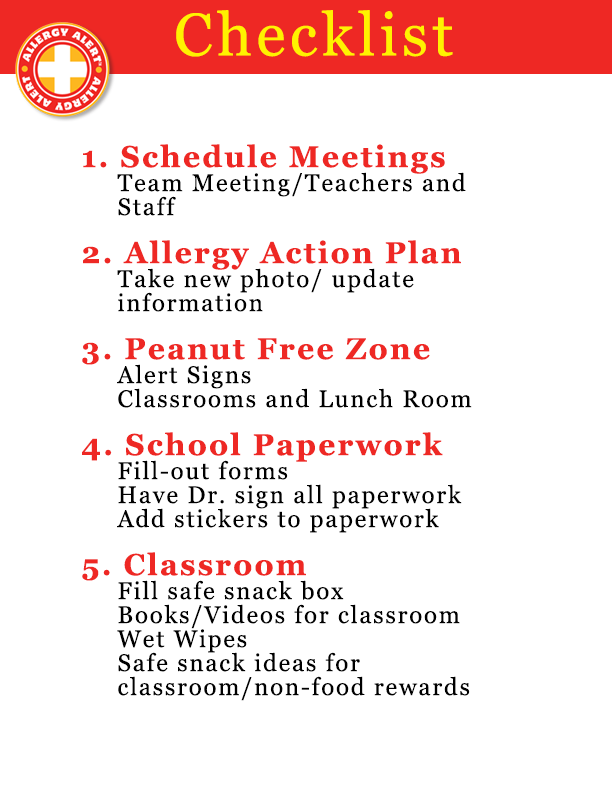
<style>
.page{position:relative;width:612px;height:792px;background:#ffffff}
.page>*{position:absolute;margin:0}
.t1{font:60px "Georgia";letter-spacing:0.075em;color:#fff200}
.t2{font:24px/24px "Georgia";letter-spacing:0.075em;color:#000000}
.t3{font:30px/24px "Georgia-Bold";letter-spacing:0.075em;color:#ee2824}
</style>
<div class="page">
<p class="t1" style="left:176px;top:10px;width:277px;height:47px">Checklist</p>
<p class="t2" style="left:82px;top:144px;width:390px;height:557px"><span class="t3">1. Schedule Meetings<br> </span>Team Meeting/Teachers and<br>  Staff<br> <br><span class="t3">2. Allergy Action Plan<br></span> Take new photo/ update <br> information<br><br><span class="t3">3. Peanut Free Zone<br> </span>Alert Signs<br> Classrooms and Lunch Room<br><br><span class="t3">4. School Paperwork<br></span> Fill-out forms<br> Have Dr. sign all paperwork<br> Add stickers to paperwork<br><br><span class="t3">5. Classroom<br></span> Fill safe snack box<br> Books/Videos for classroom<br> Wet Wipes<br> Safe snack ideas for <br> classroom/non-food rewards</p>
</div>
